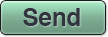
<style>
.page{position:relative;width:108px;height:37px}
.page>*{position:absolute;margin:0}
.t1{font:24px "Helvetica-Bold";color:#31343f}
</style>
<div class="page">
<p class="t1" style="left:23px;top:8px;width:57px;height:18px">Send</p>
</div>
